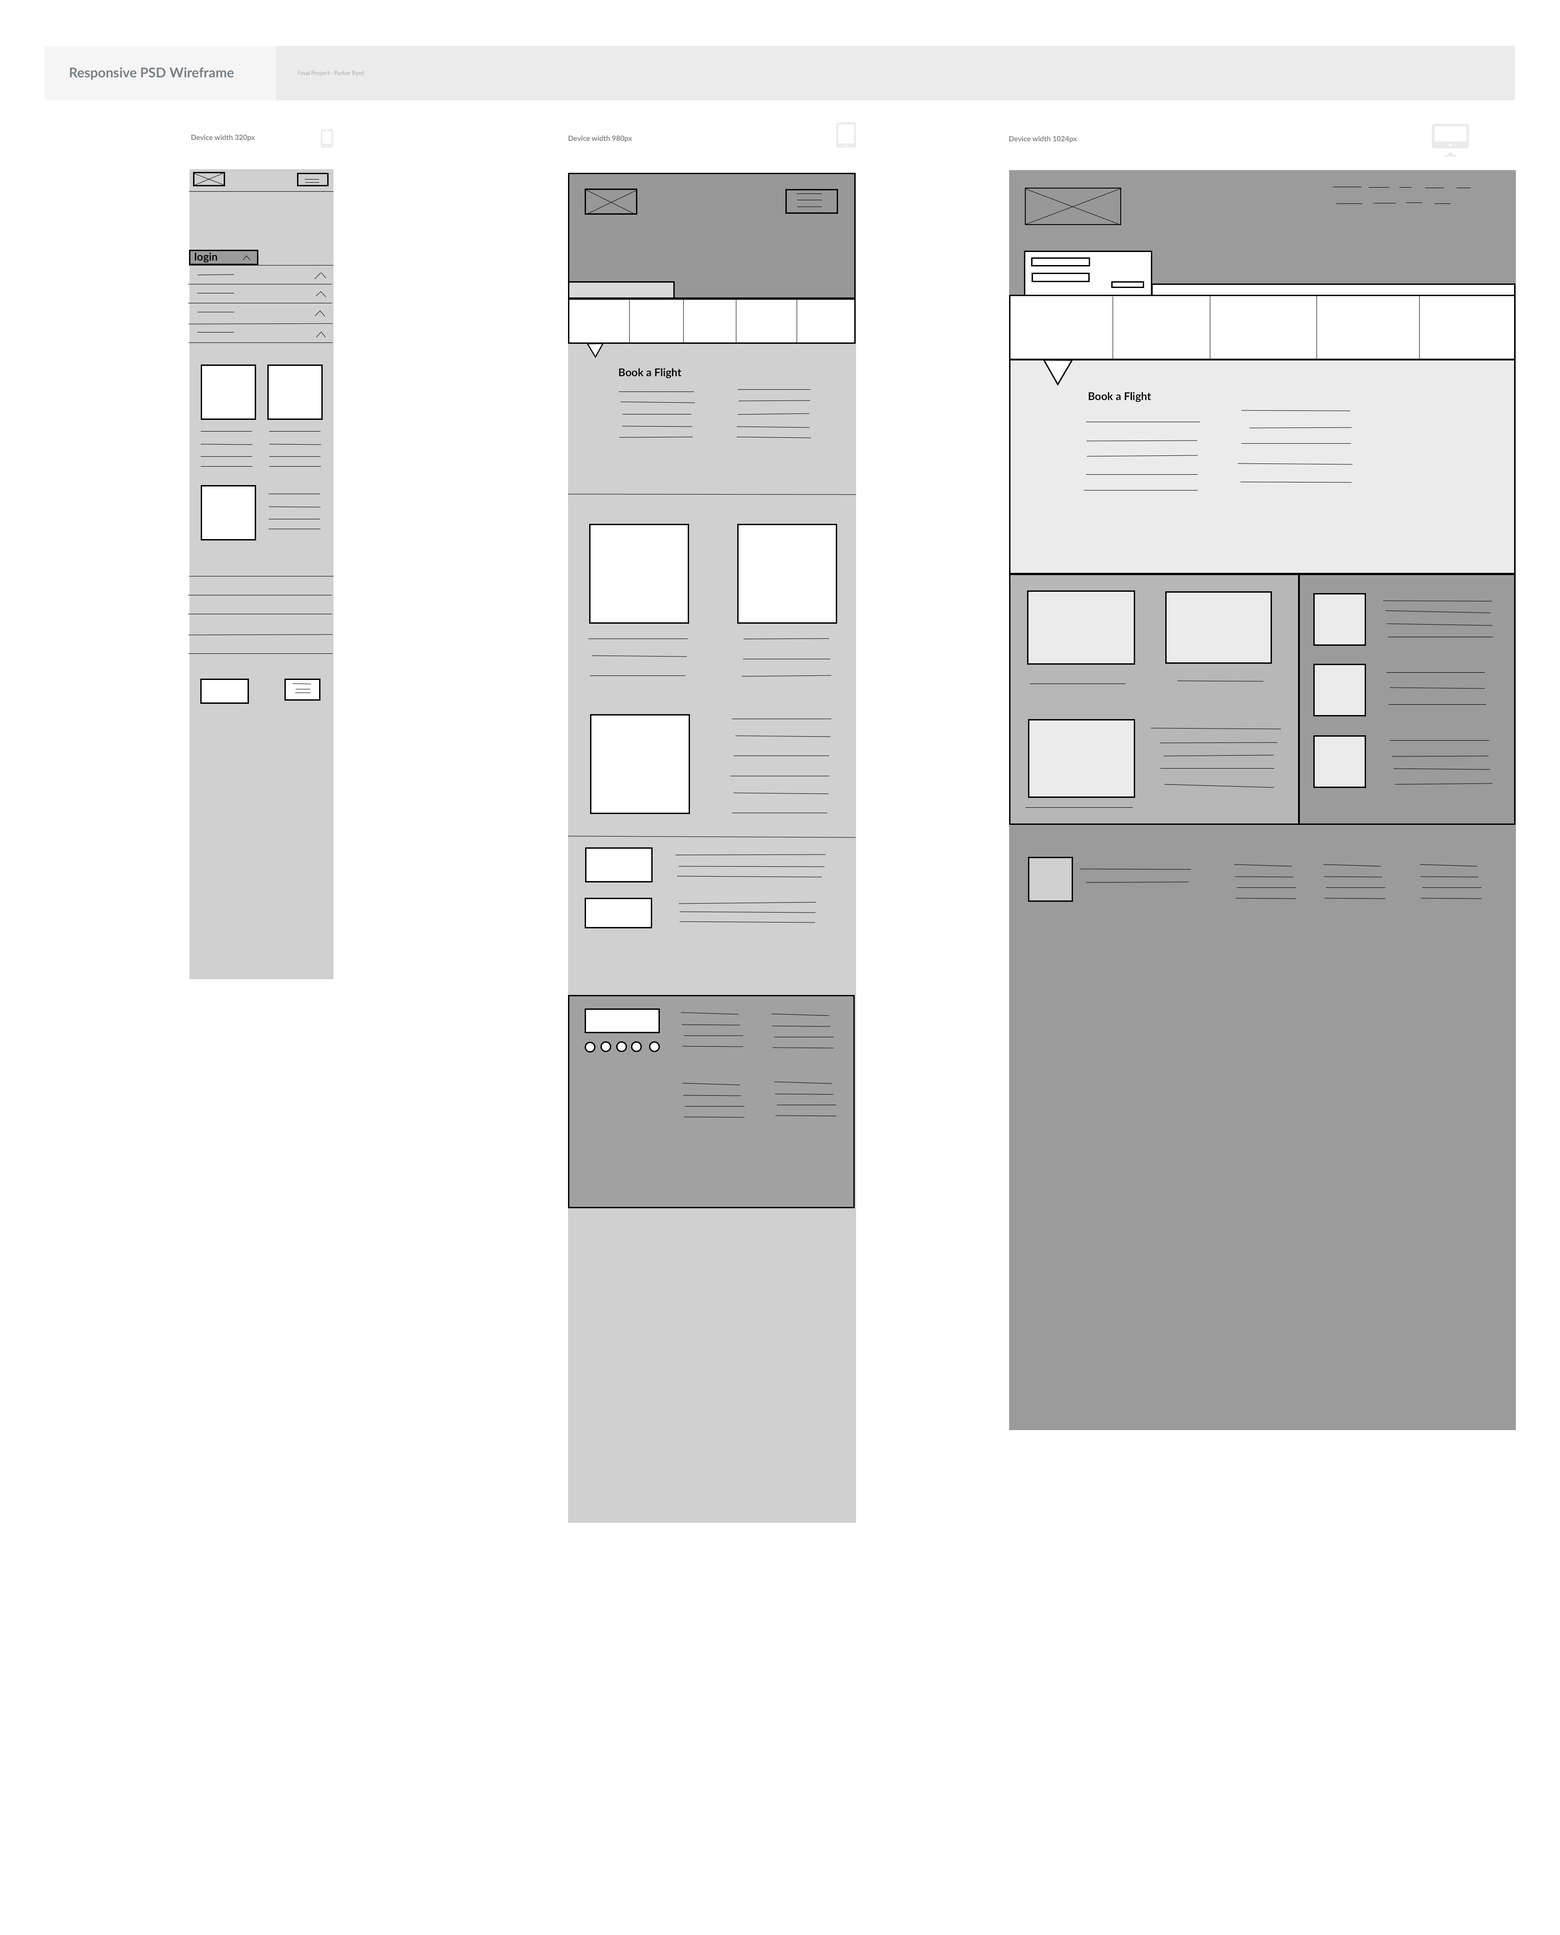
<style>
.page{position:relative;width:1560px;height:1935px;background:#ffffff}
.page>*{position:absolute;margin:0}
.t1{font:13.5px "Lato-Bold";color:#787f84}
.t2{font:6.3px "MyriadPro-Regular";color:#afb4b8}
.t3{font:7.2px "Lato-Bold";color:#878787}
.t4{font:10.8px "Lato-Bold";color:#030303}
</style>
<div class="page">
<p class="t1" style="left:70px;top:67px;width:164px;height:13px">Responsive PSD Wireframe</p>
<p class="t2" style="left:298px;top:71px;width:66px;height:5px">Final Project - Parker Byrd</p>
<p class="t3" style="left:191px;top:134px;width:64px;height:7px">Device width 320px</p>
<p class="t3" style="left:568px;top:135px;width:64px;height:7px">Device width 980px</p>
<p class="t3" style="left:1009px;top:135px;width:68px;height:8px">Device width 1024px</p>
<p class="t4" style="left:195px;top:252px;width:22px;height:11px">login</p>
<p class="t4" style="left:619px;top:368px;width:62px;height:10px">Book a Flight</p>
<p class="t4" style="left:1089px;top:392px;width:62px;height:10px">Book a Flight</p>
</div>
